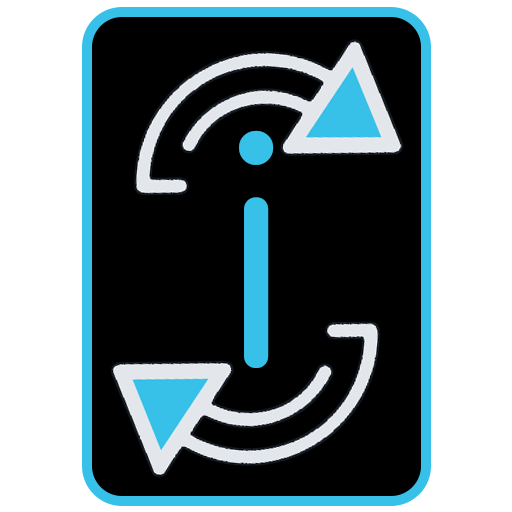
<style>
.page{position:relative;width:512px;height:512px;background:#000000}
.page>*{position:absolute;margin:0}
.t1{font:311.9px "Comfortaa-Regular";color:#37c0e8}
</style>
<div class="page">
<p class="t1" style="left:239px;top:130px;width:35px;height:238px">i</p>
</div>
